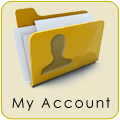
<style>
.page{position:relative;width:120px;height:120px;background:#ece5c9}
.page>*{position:absolute;margin:0}
.t1{font:14px "CenturyGothic";letter-spacing:0.121em;color:#000000}
</style>
<div class="page">
<p class="t1" style="left:12px;top:97px;width:98px;height:14px">My Account</p>
</div>
